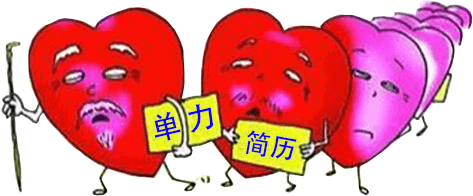
<style>
.page{position:relative;width:473px;height:196px;background:#ffffff}
.page>*{position:absolute;margin:0}
.t1{font:30px "AdobeHeitiStd-Regular";color:#1301fe}
.t2{font:26.3px "AdobeHeitiStd-Regular";color:#1301fe}
</style>
<div class="page">
<p class="t1" style="left:154px;top:104px;width:59px;height:37px;rotate:-13deg">单 力</p>
<p class="t2" style="left:245px;top:130px;width:52px;height:30px;rotate:10deg">简历</p>
</div>
